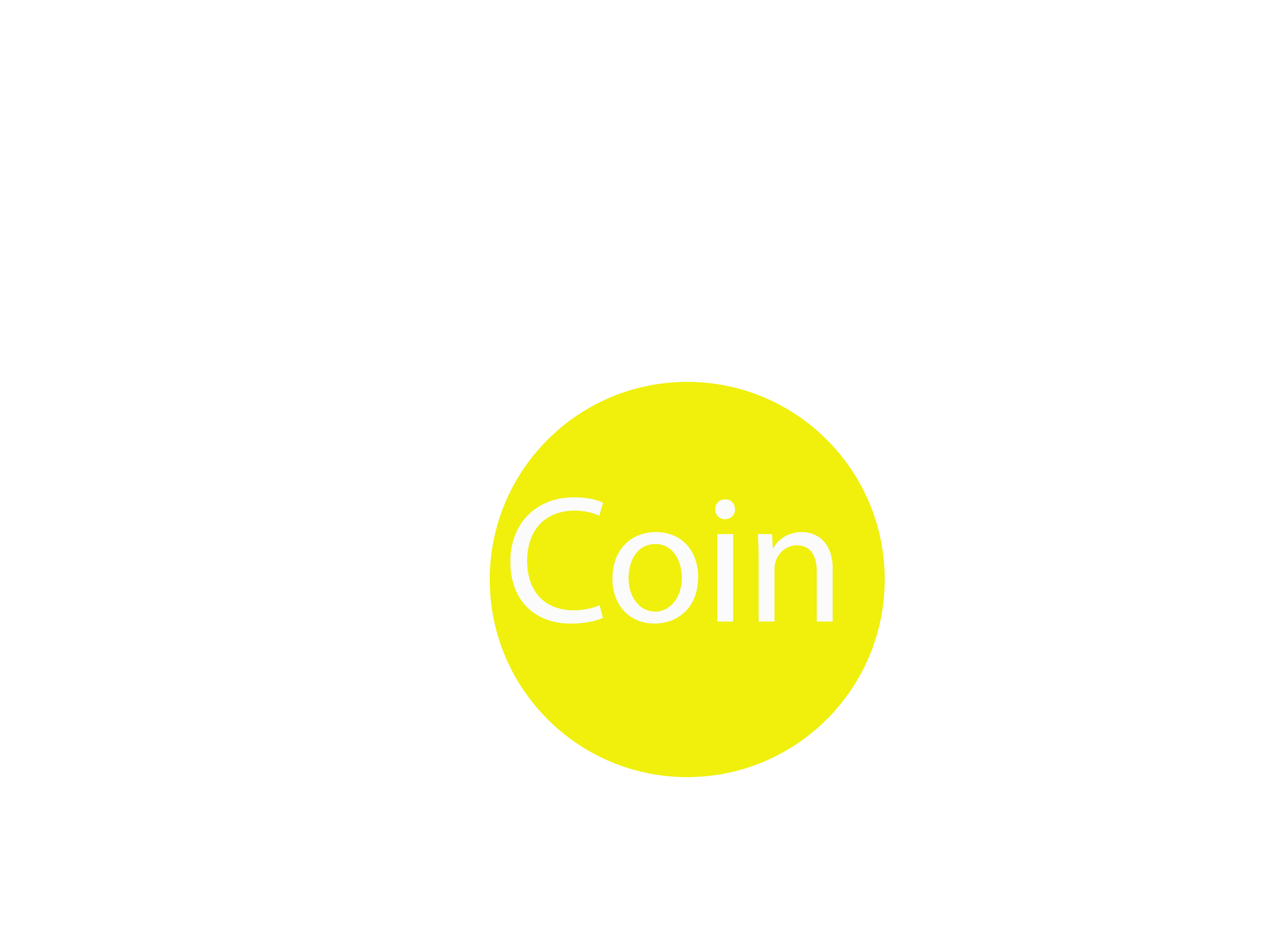
<style>
.page{position:relative;width:1261px;height:946px;background:#ffffff}
.page>*{position:absolute;margin:0}
.t1{font:180.7px "MyriadPro-Regular";letter-spacing:-0.005em;color:#fbfbfb}
</style>
<div class="page">
<p class="t1" style="left:510px;top:497px;width:323px;height:126px">Coin</p>
</div>
